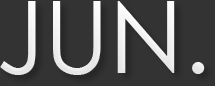
<style>
.page{position:relative;width:215px;height:86px;background:#333333}
.page>*{position:absolute;margin:0}
.t1{font:100px "CenturyGothic";color:#ffffff}
</style>
<div class="page">
<p class="t1" style="left:0px;top:1px;width:205px;height:74px">JUN.</p>
</div>
